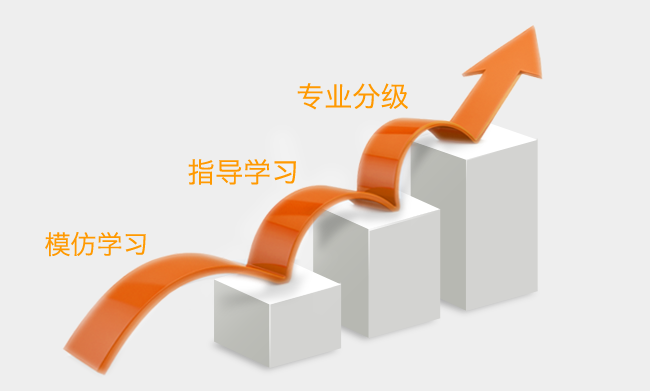
<style>
.page{position:relative;width:650px;height:391px;background:#eeeeee}
.page>*{position:absolute;margin:0}
.t1{font:28px "HiraginoSansGB-W3";color:#ff9900}
.t2{font:26px "HiraginoSansGB-W3";color:#ff9900}
</style>
<div class="page">
<p class="t1" style="left:297px;top:83px;width:111px;height:27px">专业分级</p>
<p class="t1" style="left:188px;top:159px;width:108px;height:26px">指导学习</p>
<p class="t2" style="left:45px;top:232px;width:101px;height:25px">模仿学习</p>
</div>
